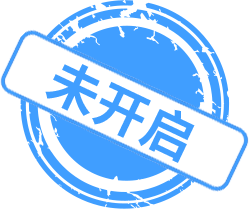
<style>
.page{position:relative;width:249px;height:209px;background:#ffffff}
.page>*{position:absolute;margin:0}
.t1{font:51.9px "SourceHanSansCN-Bold";color:#409eff}
</style>
<div class="page">
<p class="t1" style="left:45px;top:64px;width:150px;height:99px;rotate:25deg">未开启</p>
</div>
